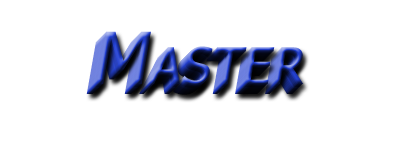
<style>
.page{position:relative;width:400px;height:150px;background:#ffffff}
.page>*{position:absolute;margin:0}
.t1{font:72px "Tahoma";letter-spacing:0.03em;font-variant:small-caps;font-style:italic}
</style>
<div class="page">
<p class="t1" style="left:95px;top:32px;width:208px;height:54px">Master</p>
</div>
